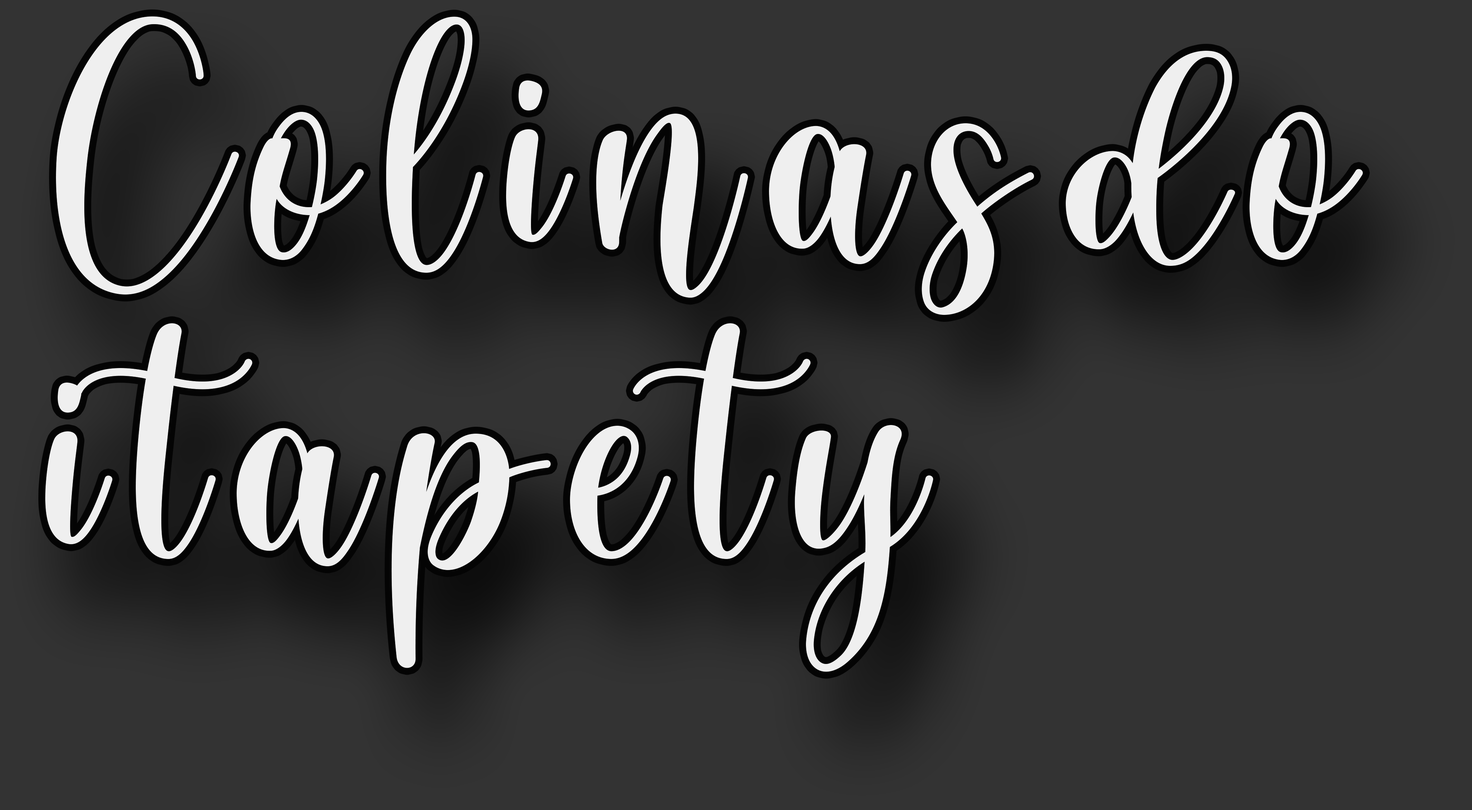
<style>
.page{position:relative;width:1472px;height:810px;background:#333333}
.page>*{position:absolute;margin:0}
.t1{font:447.6px/302.2px "SouthCalistoga_PERSONALUSE";letter-spacing:0.075em;color:#ffffff}
.t2{font:358.1px "SouthCalistoga_PERSONALUSE";letter-spacing:0.075em;color:#ffffff;scale:1.25 1}
</style>
<div class="page">
<p class="t1" style="left:45px;top:16px;width:1318px;height:656px;text-align:justify;opacity:0.92">Colinas <span class="t2">d</span>o<br>itapety</p>
</div>
